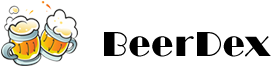
<style>
.page{position:relative;width:279px;height:70px;background:#ffffff}
.page>*{position:absolute;margin:0}
.t1{font:36px "Broadway";letter-spacing:0.035em;color:#000000}
</style>
<div class="page">
<p class="t1" style="left:104px;top:32px;width:167px;height:25px">BeerDex</p>
</div>
